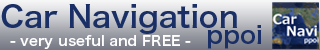
<style>
.page{position:relative;width:320px;height:50px}
.page>*{position:absolute;margin:0}
.t1{font:29.9px "HiraKakuProN-W6";color:#192f65}
.t2{font:23.9px "HiraKakuProN-W6";color:#192f65}
.t3{font:13.9px "HiraKakuProN-W6";color:#ffffff}
</style>
<div class="page">
<p class="t1" style="left:1px;top:4px;width:236px;height:30px">Car Navigation</p>
<p class="t2" style="left:207px;top:25px;width:55px;height:24px">ppoi</p>
<p class="t3" style="left:10px;top:35px;width:181px;height:14px">- very useful and FREE -</p>
</div>
